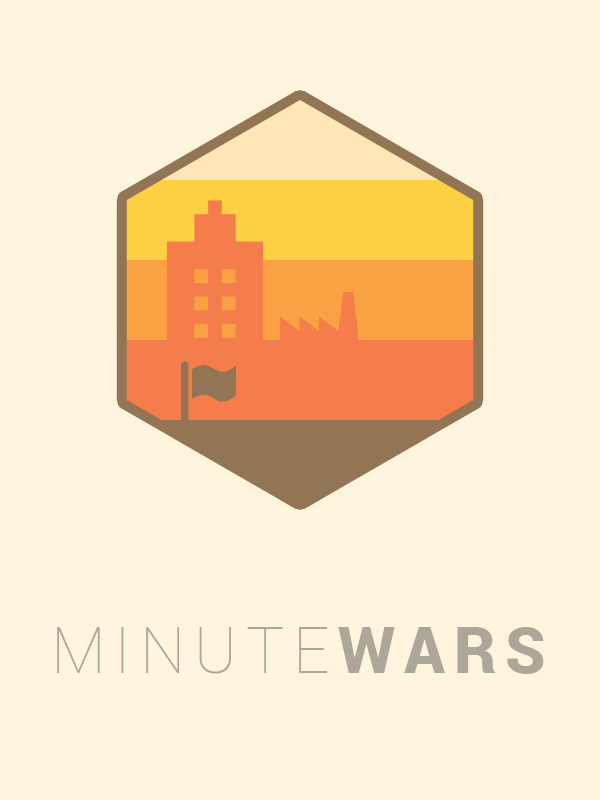
<style>
.page{position:relative;width:600px;height:800px;background:#fff5de}
.page>*{position:absolute;margin:0}
.t1{font:64px "Roboto-Thin";letter-spacing:0.14em;color:#ada79a}
.t2{font:64px "Roboto-Black";letter-spacing:0.14em;color:#ada79a}
</style>
<div class="page">
<p class="t1" style="left:57px;top:627px;width:487px;height:47px">MINUTE<span class="t2">WARS</span></p>
</div>
